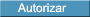
<style>
.page{position:relative;width:90px;height:17px;background:#4c94ba}
.page>*{position:absolute;margin:0}
.t1{font:12px "ArialMT";color:#fffafa}
</style>
<div class="page">
<p class="t1" style="left:17px;top:3px;width:50px;height:10px">Autorizar</p>
</div>
